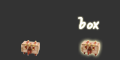
<style>
.page{position:relative;width:120px;height:60px;background:#333333}
.page>*{position:absolute;margin:0}
.t1{font:14px "PolyhedralLCBB";color:#ffffff}
</style>
<div class="page">
<p class="t1" style="left:78px;top:17px;width:21px;height:13px">box</p>
</div>
